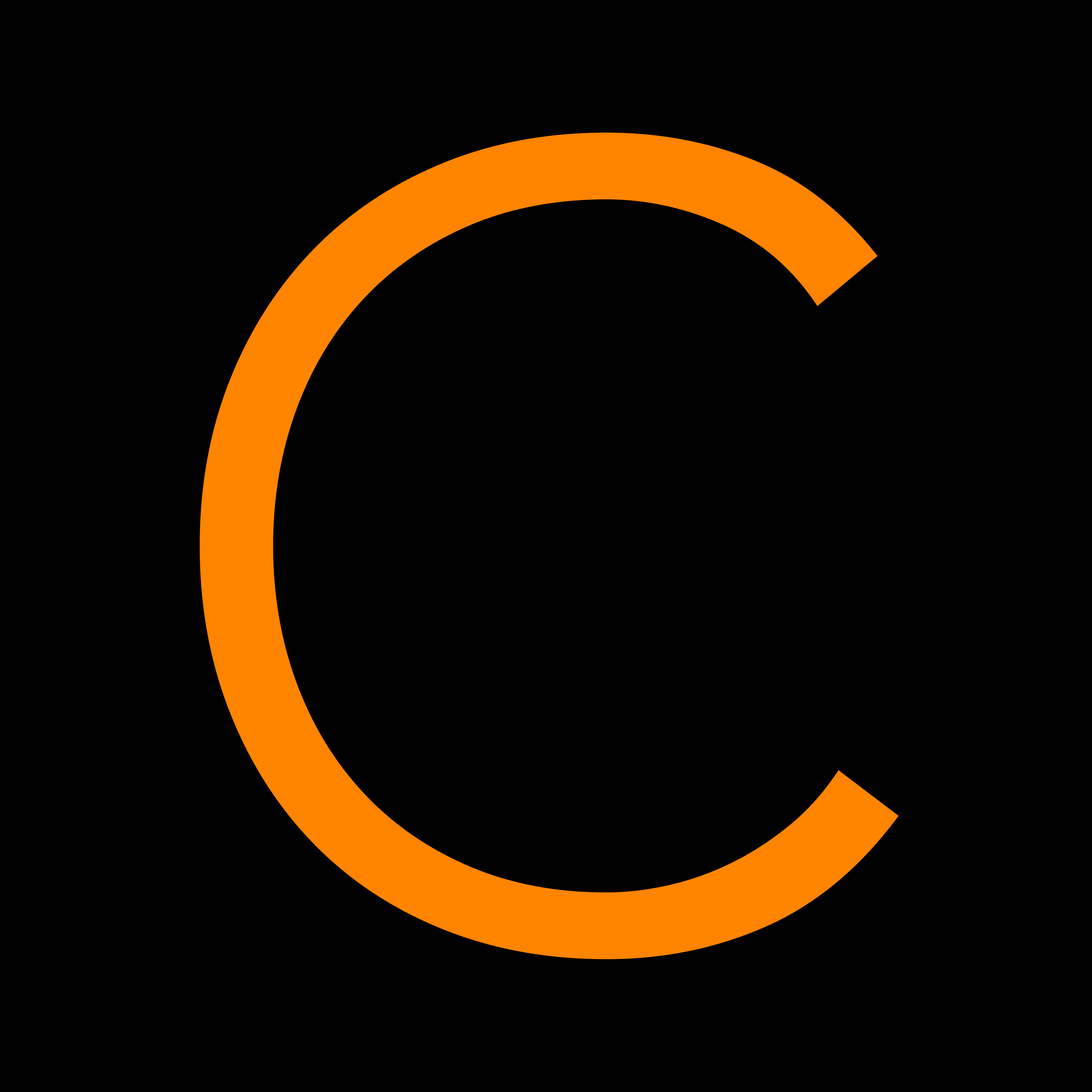
<style>
.page{position:relative;width:1092px;height:1092px;background:#000000}
.page>*{position:absolute;margin:0}
.t1{font:1110.8px "Avenir-Light";color:#ff8400}
</style>
<div class="page">
<p class="t1" style="left:200px;top:132px;width:699px;height:827px">C</p>
</div>
